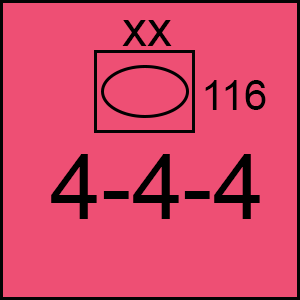
<style>
.page{position:relative;width:300px;height:300px;background:#ee4f74}
.page>*{position:absolute;margin:0}
.t1{font:50px "ArialMT";color:#000000}
.t2{font:41.7px "ArialMT";color:#000000}
.t3{font:91.7px "ArialMT";color:#000000}
</style>
<div class="page">
<p class="t1" style="left:122px;top:20px;width:50px;height:26px">xx</p>
<p class="t2" style="left:205px;top:80px;width:61px;height:30px">116</p>
<p class="t3" style="left:51px;top:154px;width:209px;height:65px">4-4-4</p>
</div>
